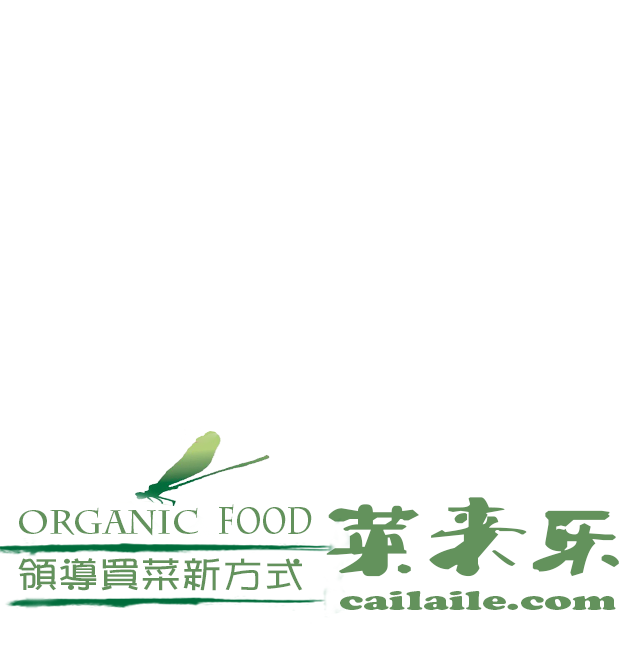
<style>
.page{position:relative;width:620px;height:647px;background:#ffffff}
.page>*{position:absolute;margin:0}
.t1{font:71.6px "Ò¶¸ùÓÑÌØÉ«¼òÌåÉý¼¶°æ";color:#63925c;scale:1.4 1}
.t2{font:33px "CharlemagneStd-Bold";color:#63925c}
.t3{font:37.7px "CharlemagneStd-Bold";color:#63925c;scale:0.72 1}
.t4{font:35.3px "Pop2EG-Bold-T-GB";color:#63925c;scale:1.16 1}
.t5{font:26.1px "CooperBlackStd";color:#63925c;scale:1.68 1}
</style>
<div class="page">
<p class="t1" style="left:326px;top:497px;width:293px;height:80px">菜来乐</p>
<p class="t2" style="left:19px;top:507px;width:180px;height:29px">organic</p>
<p class="t3" style="left:219px;top:504px;width:93px;height:30px">food</p>
<p class="t4" style="left:18px;top:558px;width:285px;height:33px">领导买菜新方式</p>
<p class="t5" style="left:340px;top:591px;width:276px;height:19px">cailaile.com</p>
</div>
